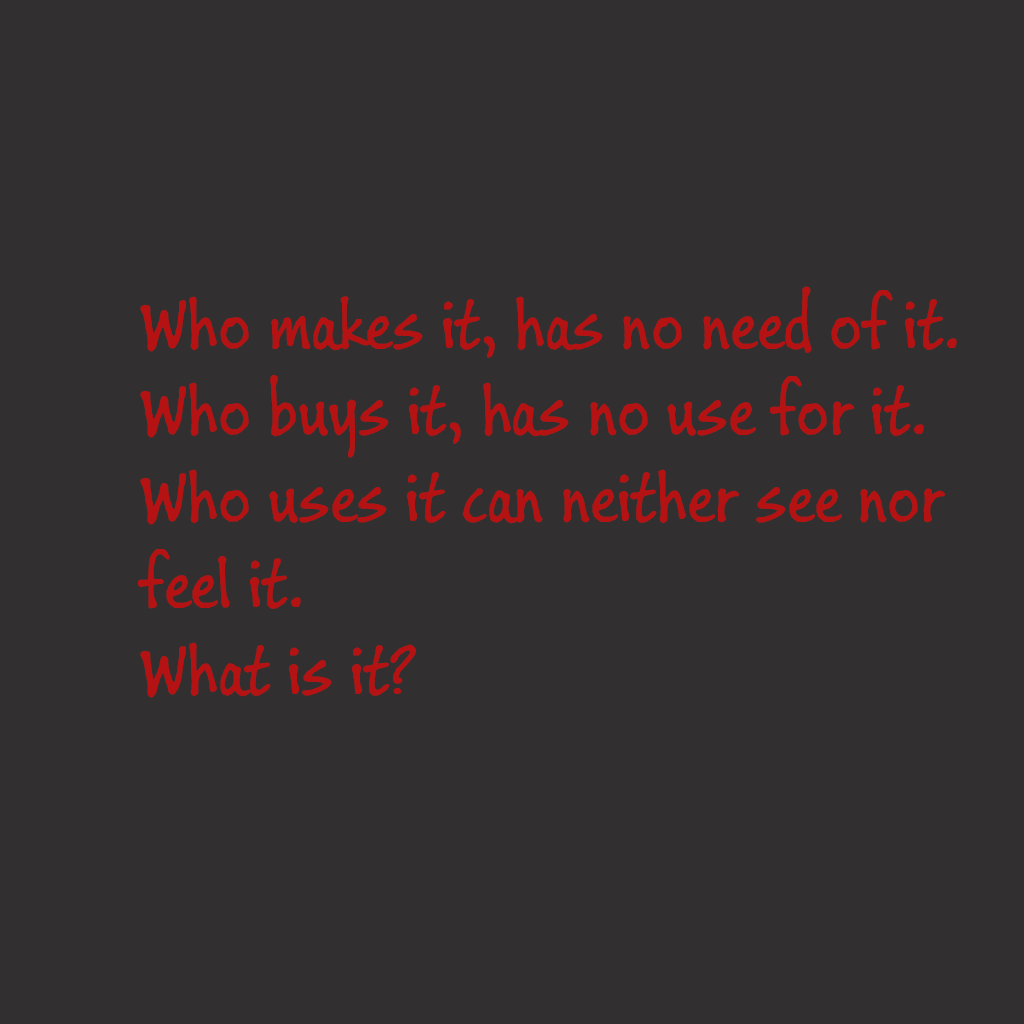
<style>
.page{position:relative;width:1024px;height:1024px;background:#312f2f}
.page>*{position:absolute;margin:0}
.t1{font:72px "BuxtonSketch";color:#b51313}
</style>
<div class="page">
<p class="t1" style="left:138px;top:286px;width:819px;height:412px;text-align:right">Who makes it, has no need of it.<br>Who buys it, has no use for it.<br>Who uses it can neither see nor<br>feel it.<br>What is it?</p>
</div>
